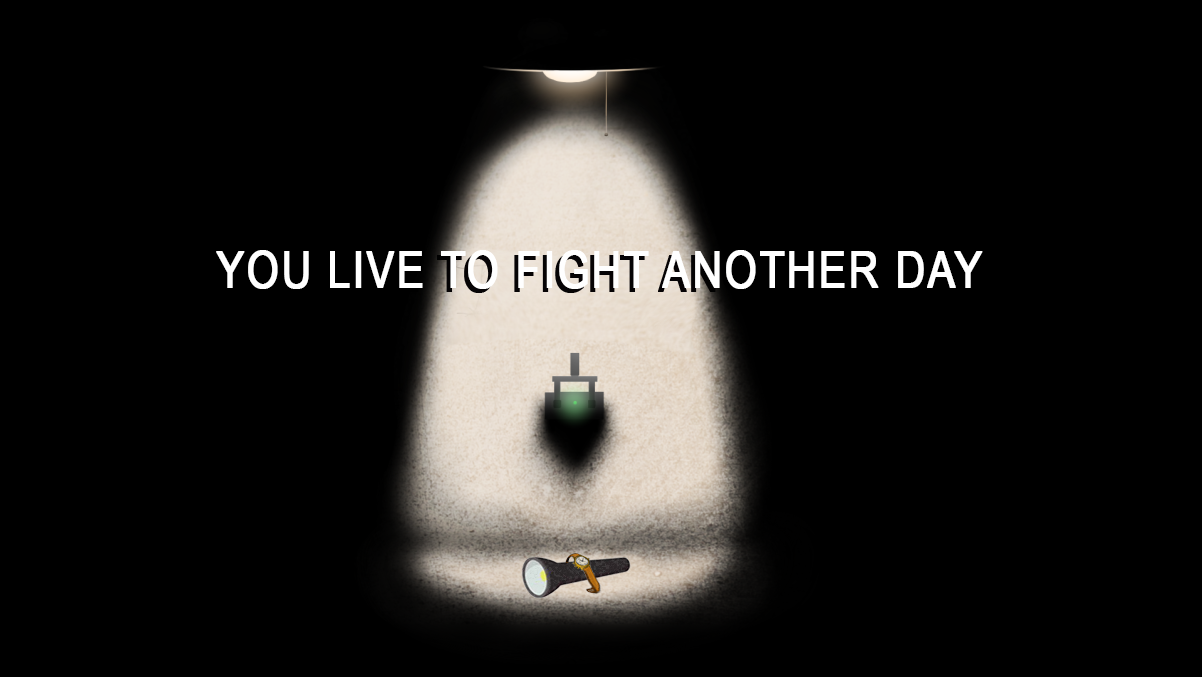
<style>
.page{position:relative;width:1202px;height:677px;background:#000000}
.page>*{position:absolute;margin:0}
.t1{font:50px "ArialNarrow";letter-spacing:0.025em;color:#ffffff;text-transform:uppercase;font-weight:bold}
</style>
<div class="page">
<p class="t1" style="left:216px;top:250px;width:767px;height:39px">You live to fight another day</p>
</div>
